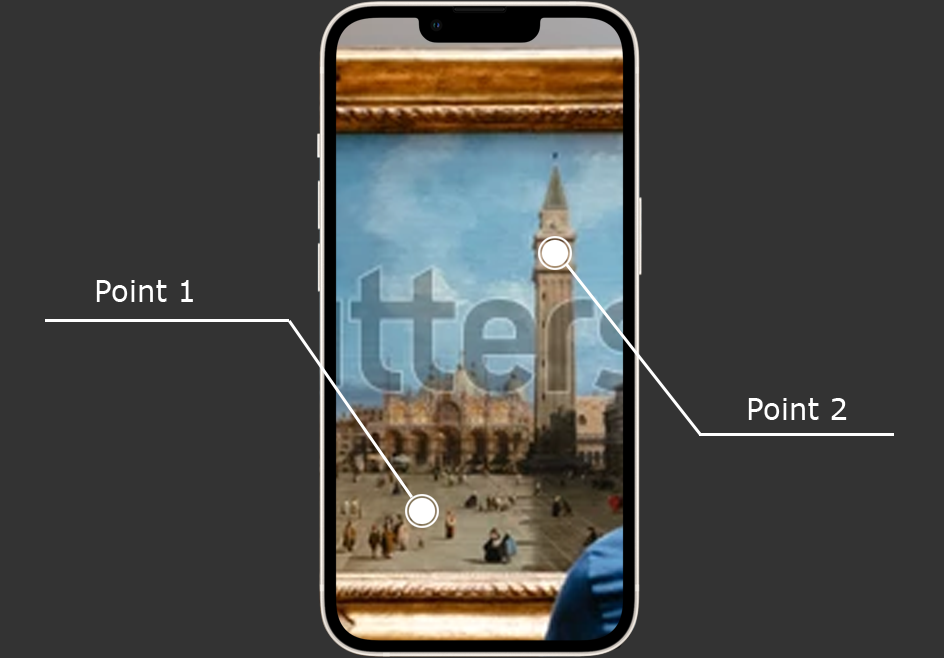
<style>
.page{position:relative;width:944px;height:658px;background:#333333}
.page>*{position:absolute;margin:0}
.t1{font:30px "Verdana";color:#ffffff}
</style>
<div class="page">
<p class="t1" style="left:96px;top:280px;width:97px;height:22px">Point 1</p>
<p class="t1" style="left:748px;top:398px;width:99px;height:22px">Point 2</p>
</div>
